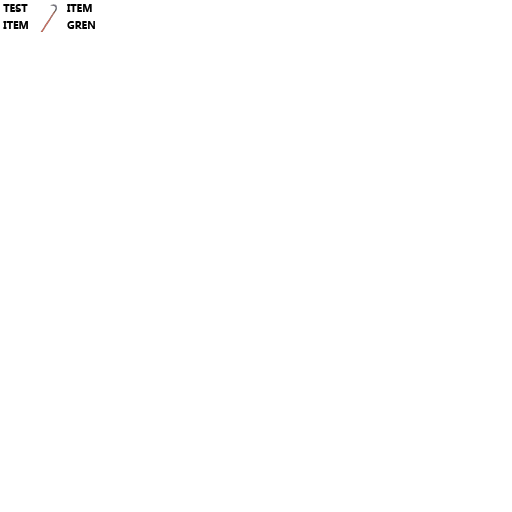
<style>
.page{position:relative;width:512px;height:512px;background:#ffffff}
.page>*{position:absolute;margin:0}
.t1{font:10px "MicrosoftYaHei-Bold";color:#000000}
</style>
<div class="page">
<p class="t1" style="left:3px;top:4px;width:25px;height:25px">TEST<br>ITEM</p>
<p class="t1" style="left:67px;top:4px;width:28px;height:25px">ITEM<br> GREN</p>
</div>
